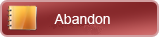
<style>
.page{position:relative;width:159px;height:37px}
.page>*{position:absolute;margin:0}
.t1{font:14px "ArialMT";color:#fefcfc}
</style>
<div class="page">
<p class="t1" style="left:54px;top:14px;width:56px;height:10px">Abandon</p>
</div>
